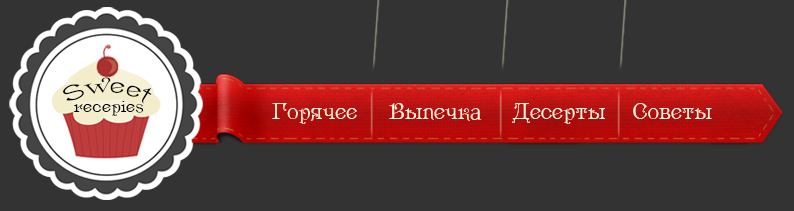
<style>
.page{position:relative;width:794px;height:211px;background:#333333}
.page>*{position:absolute;margin:0}
.t1{font:23.1px "Ametist";color:#f7f1d8}
</style>
<div class="page">
<p class="t1" style="left:272px;top:103px;width:85px;height:21px">Горячее</p>
<p class="t1" style="left:389px;top:103px;width:93px;height:18px">Выпечка</p>
<p class="t1" style="left:512px;top:103px;width:93px;height:21px">Десерты</p>
<p class="t1" style="left:633px;top:103px;width:79px;height:16px">Советы</p>
</div>
